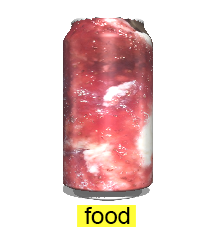
<style>
.page{position:relative;width:216px;height:232px;background:#ffffff}
.page>*{position:absolute;margin:0}
.t1{font:24px "ArialMT";color:#000000}
</style>
<div class="page">
<p class="t1" style="left:84px;top:207px;width:46px;height:17px">food</p>
</div>
